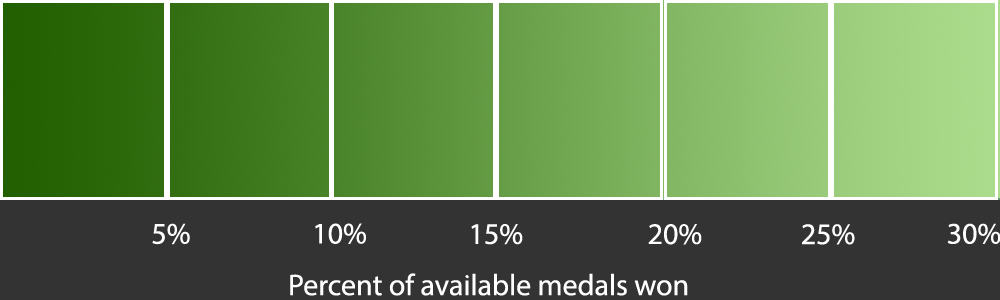
<style>
.page{position:relative;width:1000px;height:300px;background:#333333}
.page>*{position:absolute;margin:0}
.t1{font:30px "MyriadPro-Regular";color:#ffffff}
</style>
<div class="page">
<p class="t1" style="left:152px;top:223px;width:38px;height:22px">5%</p>
<p class="t1" style="left:315px;top:223px;width:51px;height:21px">10%</p>
<p class="t1" style="left:471px;top:224px;width:52px;height:21px">15%</p>
<p class="t1" style="left:648px;top:224px;width:54px;height:21px">20%</p>
<p class="t1" style="left:802px;top:224px;width:53px;height:21px">25%</p>
<p class="t1" style="left:947px;top:223px;width:54px;height:21px">30%</p>
<p class="t1" style="left:290px;top:273px;width:398px;height:23px">Percent of available medals won</p>
</div>
